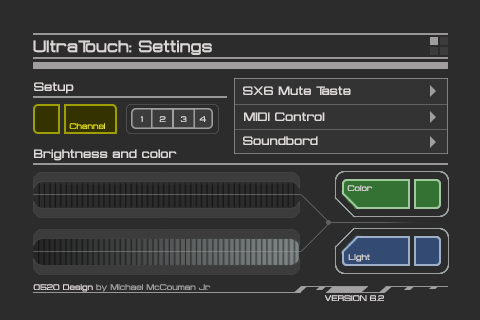
<style>
.page{position:relative;width:480px;height:320px;background:#2c2c2c}
.page>*{position:absolute;margin:0}
.t1{font:16px "Probert-Bold";color:#dad6d6}
.t2{font:12px "Probert-Bold";color:#dedada}
.t3{font:8px "Probert-Bold";color:#dedada}
.t4{font:8px "Probert-Bold";color:#a09e9e}
.t5{font:8px "Probert-Bold";color:#dad6d6}
</style>
<div class="page">
<p class="t1" style="left:33px;top:40px;width:179px;height:15px">UltraTouch: Settings</p>
<p class="t2" style="left:34px;top:82px;width:40px;height:12px">Setup</p>
<p class="t2" style="left:243px;top:86px;width:108px;height:9px">SX6 Mute Taste</p>
<p class="t2" style="left:244px;top:112px;width:81px;height:9px">MIDI Control</p>
<p class="t2" style="left:243px;top:136px;width:75px;height:9px">Soundbord</p>
<p class="t2" style="left:34px;top:149px;width:143px;height:12px">Brightness and color</p>
<p class="t3" style="left:347px;top:185px;width:26px;height:6px">Color</p>
<p class="t3" style="left:348px;top:254px;width:22px;height:8px">Light</p>
<p class="t4" style="left:33px;top:284px;width:178px;height:8px"><span class="t5">0520 Design</span> by Michael McCouman Jr.</p>
<p class="t3" style="left:324px;top:295px;width:60px;height:6px">VERSION 6.2</p>
</div>
